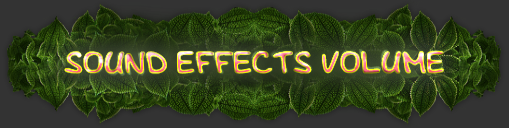
<style>
.page{position:relative;width:509px;height:128px;background:#333333}
.page>*{position:absolute;margin:0}
.t1{font:33.2px "Foma_flibustier";scale:1.09 1}
</style>
<div class="page">
<p class="t1" style="left:64px;top:51px;width:380px;height:23px">SOUND EFFECTS VOLUME</p>
</div>
